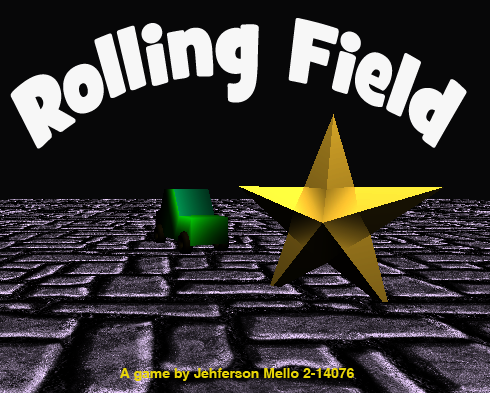
<style>
.page{position:relative;width:490px;height:393px;background:#070708}
.page>*{position:absolute;margin:0}
.t1{font:72px "GrilledCheeseBTNToasted";color:#f7f7f7}
.t2{font:14px "HelveticaCE-Bold";color:#e8d608}
</style>
<div class="page">
<p class="t1" style="left:10px;top:18px;width:457px;height:131px;text-align:center">Rolling Field</p>
<p class="t2" style="left:120px;top:368px;width:234px;height:13px">A game by Jehferson Mello 2-14076</p>
</div>
